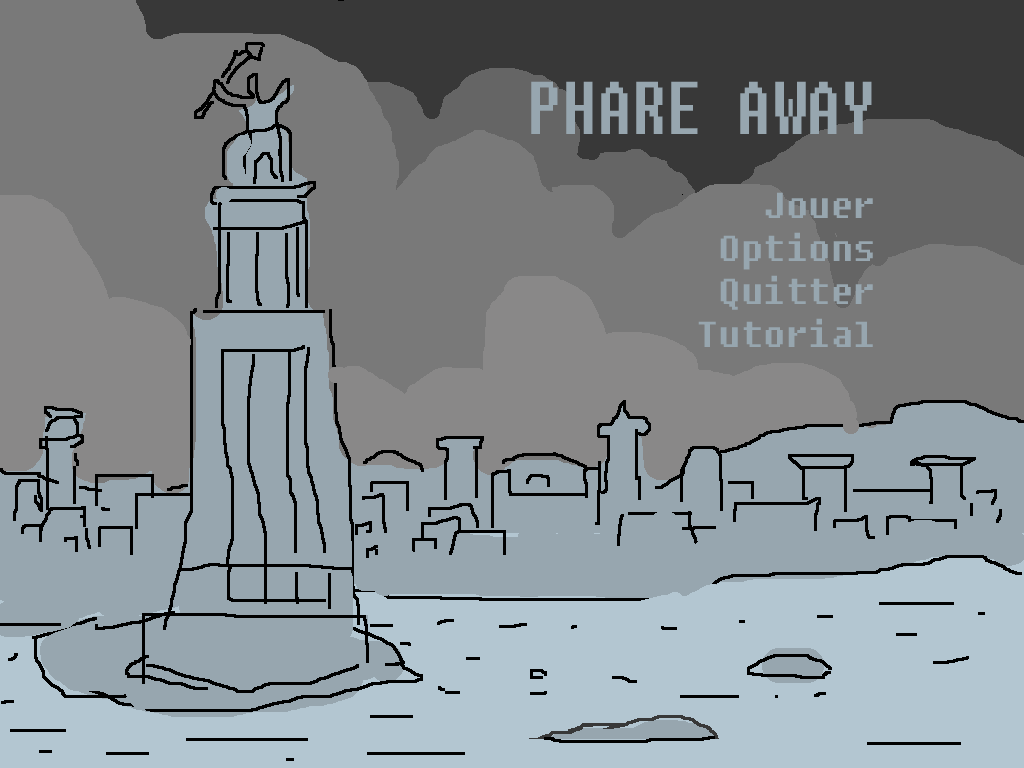
<style>
.page{position:relative;width:1024px;height:768px;background:#97a6af}
.page>*{position:absolute;margin:0}
.t1{font:74.5px "Fixedsys";color:#97a6af;scale:0.75 1}
.t2{font:36px "Fixedsys";color:#97a6af}
</style>
<div class="page">
<p class="t1" style="left:531px;top:81px;width:341px;height:53px">PHARE AWAY</p>
<p class="t2" style="left:698px;top:192px;width:175px;height:155px;text-align:right">Jouer<br>Options<br>Quitter<br>Tutorial</p>
</div>
